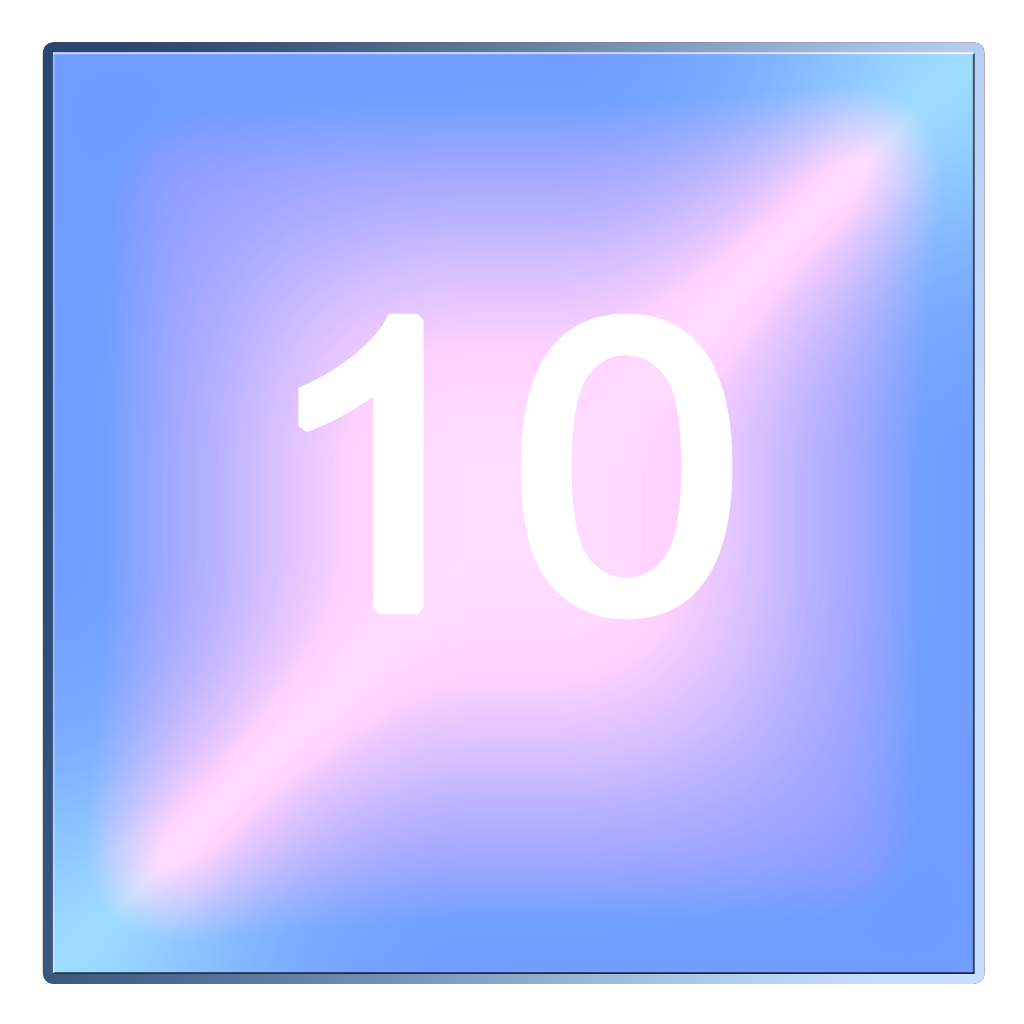
<style>
.page{position:relative;width:1024px;height:1024px}
.page>*{position:absolute;margin:0}
.t1{font:400px "ArialNarrow";color:#ffffff;font-weight:bold;scale:1.3 1}
</style>
<div class="page">
<p class="t1" style="left:298px;top:313px;width:435px;height:307px">10</p>
</div>
